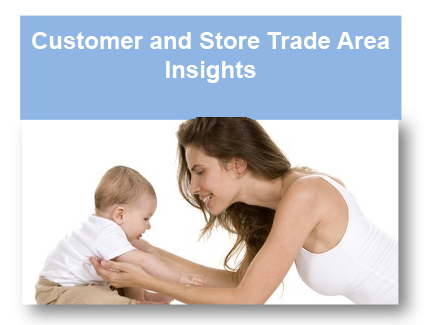
<style>
.page{position:relative;width:424px;height:325px;background:#ffffff}
.page>*{position:absolute;margin:0}
.t1{font:24px "Arial-BoldMT";color:#ffffff}
</style>
<div class="page">
<p class="t1" style="left:32px;top:32px;width:358px;height:51px;text-align:center">Customer and Store Trade Area <br>Insights</p>
</div>
